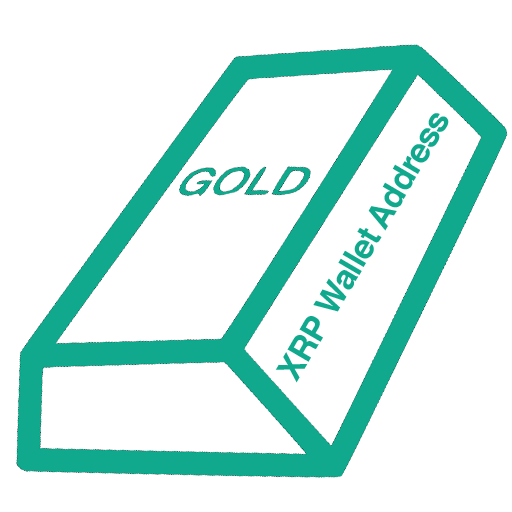
<style>
.page{position:relative;width:512px;height:512px;background:#ffffff}
.page>*{position:absolute;margin:0}
.t1{font:33.9px "Helvetica-Bold";letter-spacing:-0.025em;color:#10a98d}
</style>
<div class="page">
<p class="t1" style="left:275px;top:113px;width:174px;height:270px;rotate:-60deg">XRP Wallet Address</p>
</div>
